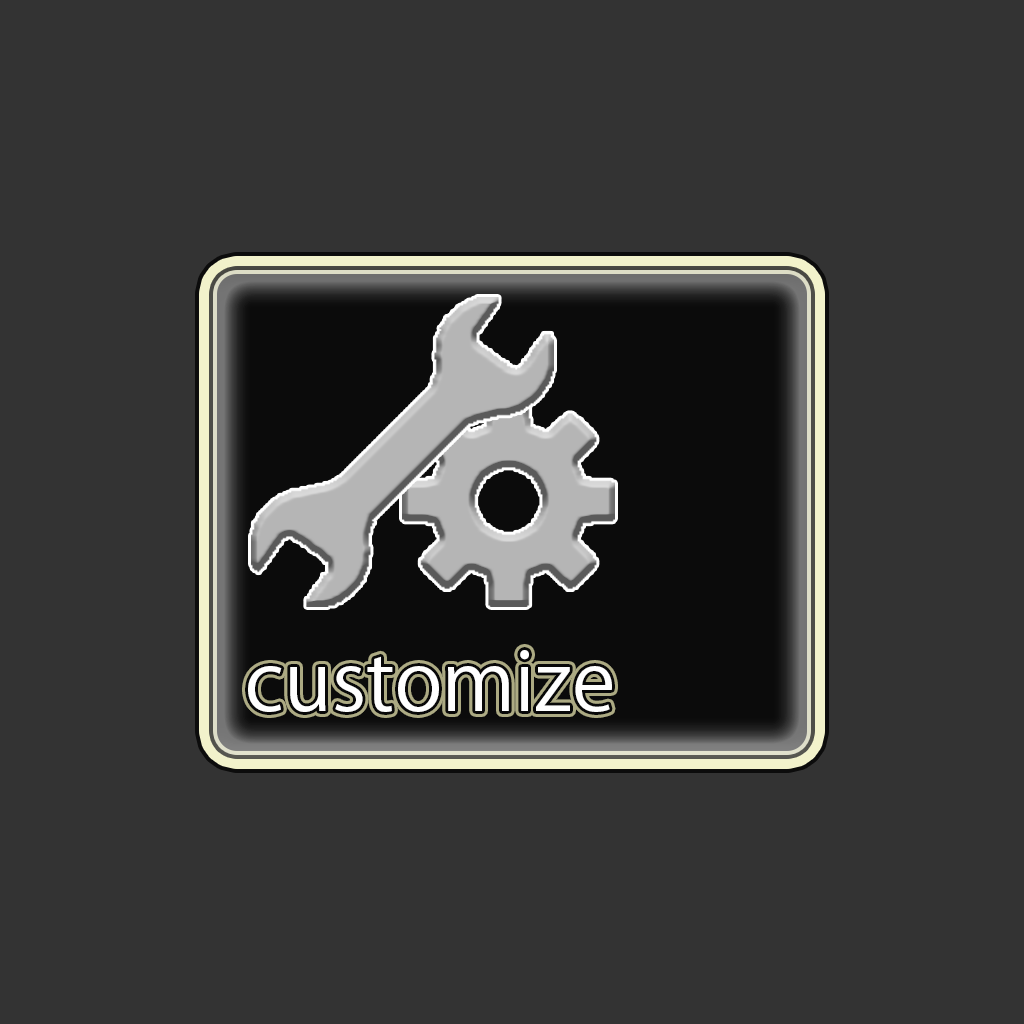
<style>
.page{position:relative;width:1024px;height:1024px;background:#333333}
.page>*{position:absolute;margin:0}
.t1{font:80.9px "KozGoPr6N-Regular";color:#ffffff}
</style>
<div class="page">
<p class="t1" style="left:248px;top:650px;width:364px;height:62px">customize</p>
</div>
